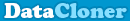
<style>
.page{position:relative;width:130px;height:21px;background:#0097cf}
.page>*{position:absolute;margin:0}
.t1{font:20px "CooperBlackStd";color:#87dfff}
.t2{font:20px "CooperBlackStd";color:#ffffff}
</style>
<div class="page">
<p class="t1" style="left:4px;top:3px;width:123px;height:15px"><span class="t2">Data</span>Cloner</p>
</div>
